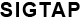
<style>
.page{position:relative;width:80px;height:20px;background:#ffffff}
.page>*{position:absolute;margin:0}
.t1{font:20px "Arial-BoldMT";letter-spacing:0.08em;color:#000000}
</style>
<div class="page">
<p class="t1" style="left:0px;top:2px;width:80px;height:15px">SIGTAP</p>
</div>
